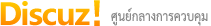
<style>
.page{position:relative;width:211px;height:26px;background:#ffffff}
.page>*{position:absolute;margin:0}
.t1{font:13.3px "Sarabun-Regular";color:#8a8a8a;scale:0.87 1}
</style>
<div class="page">
<p class="t1" style="left:111px;top:7px;width:97px;height:19px">ศูนย์กลางการควบคุม</p>
</div>
